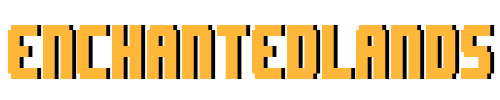
<style>
.page{position:relative;width:500px;height:100px;background:#ffffff}
.page>*{position:absolute;margin:0}
.t1{font:65.3px "8BITWONDERNominal";color:#ffb73a;scale:0.53 1}
</style>
<div class="page">
<p class="t1" style="left:8px;top:25px;width:483px;height:54px">ENCHANTEDLANDS</p>
<p class="t1" style="left:12px;top:25px;width:483px;height:54px">ENCHANTEDLANDS</p>
</div>
